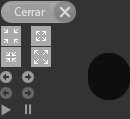
<style>
.page{position:relative;width:130px;height:119px;background:#333333}
.page>*{position:absolute;margin:0}
.t1{font:12px "MyriadPro-Regular";color:#dcdcdc}
</style>
<div class="page">
<p class="t1" style="left:14px;top:7px;width:31px;height:9px">Cerrar</p>
</div>
